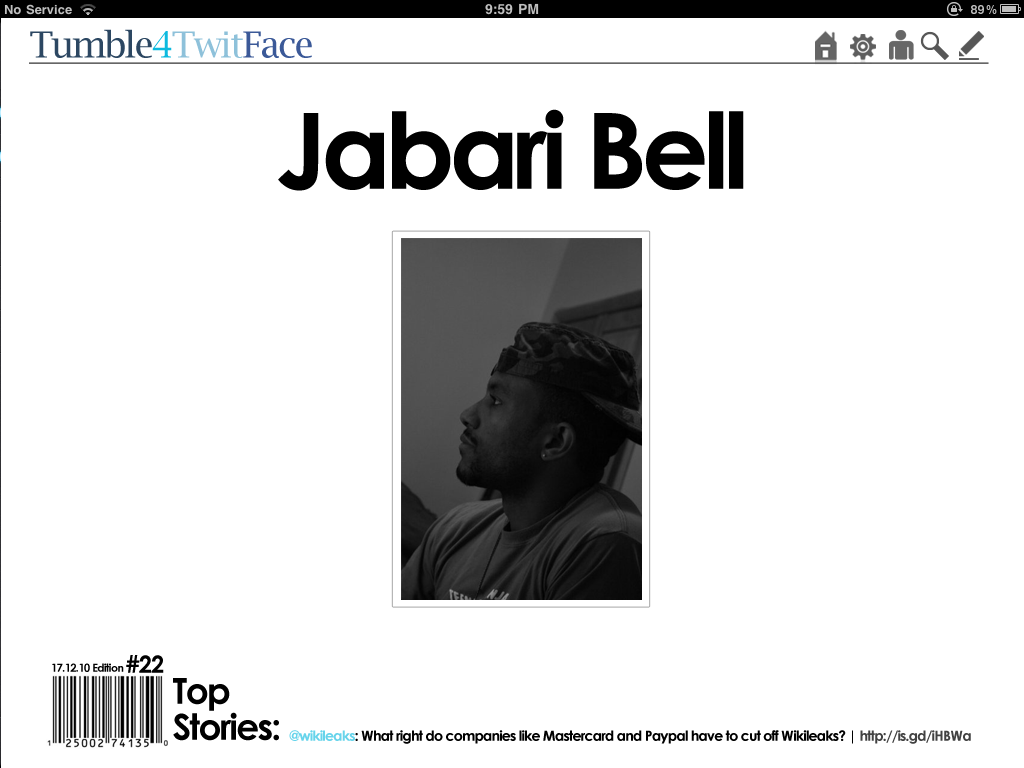
<style>
.page{position:relative;width:1024px;height:768px;background:#ffffff}
.page>*{position:absolute;margin:0}
.t1{font:36px "LucidaBright";letter-spacing:-0.05em;color:#2c4762}
.t2{font:36px "LucidaBright";letter-spacing:-0.05em;color:#0cbadf}
.t3{font:36px "LucidaBright";letter-spacing:-0.05em;color:#8ec1da}
.t4{font:36px "LucidaBright";letter-spacing:-0.05em;color:#3b5998}
.t5{font:105px "CenturyGothic-Bold";letter-spacing:-0.05em;color:#000000}
.t6{font:11px "CenturyGothic-Bold";letter-spacing:-0.05em;color:#000000}
.t7{font:24px "CenturyGothic-Bold";letter-spacing:-0.05em;color:#000000}
.t8{font:36px/36px "CenturyGothic-Bold";letter-spacing:-0.05em;color:#000000}
.t9{font:14px "CenturyGothic-Bold";letter-spacing:-0.05em;color:#000000}
.t10{font:14px "CenturyGothic-Bold";letter-spacing:-0.05em;color:#67d4eb}
.t11{font:14px "CenturyGothic-Bold";letter-spacing:-0.05em;color:#424242}
</style>
<div class="page">
<p class="t1" style="left:30px;top:29px;width:282px;height:29px">Tumble<span class="t2">4</span><span class="t3">Twit</span><span class="t4">Face</span></p>
<p class="t5" style="left:278px;top:109px;width:466px;height:82px">Jabari Bell</p>
<p class="t6" style="left:52px;top:663px;width:72px;height:9px">17.12.10 Edition</p>
<p class="t7" style="left:126px;top:655px;width:38px;height:18px">#22</p>
<p class="t8" style="left:173px;top:678px;width:106px;height:63px">Top <br>Stories:</p>
<p class="t9" style="left:289px;top:730px;width:682px;height:14px"><span class="t10">@wikileaks</span>: What right do companies like Mastercard and Paypal have to cut off Wikileaks? | <span class="t11">http://is.gd/iHBWa</span></p>
</div>
